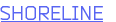
<style>
.page{position:relative;width:116px;height:22px;background:#ffffff}
.page>*{position:absolute;margin:0}
.t1{font:20px "Bender";letter-spacing:0.02em;color:#5865f2}
</style>
<div class="page">
<p class="t1" style="left:0px;top:6px;width:103px;height:15px">SHORELINE</p>
</div>
